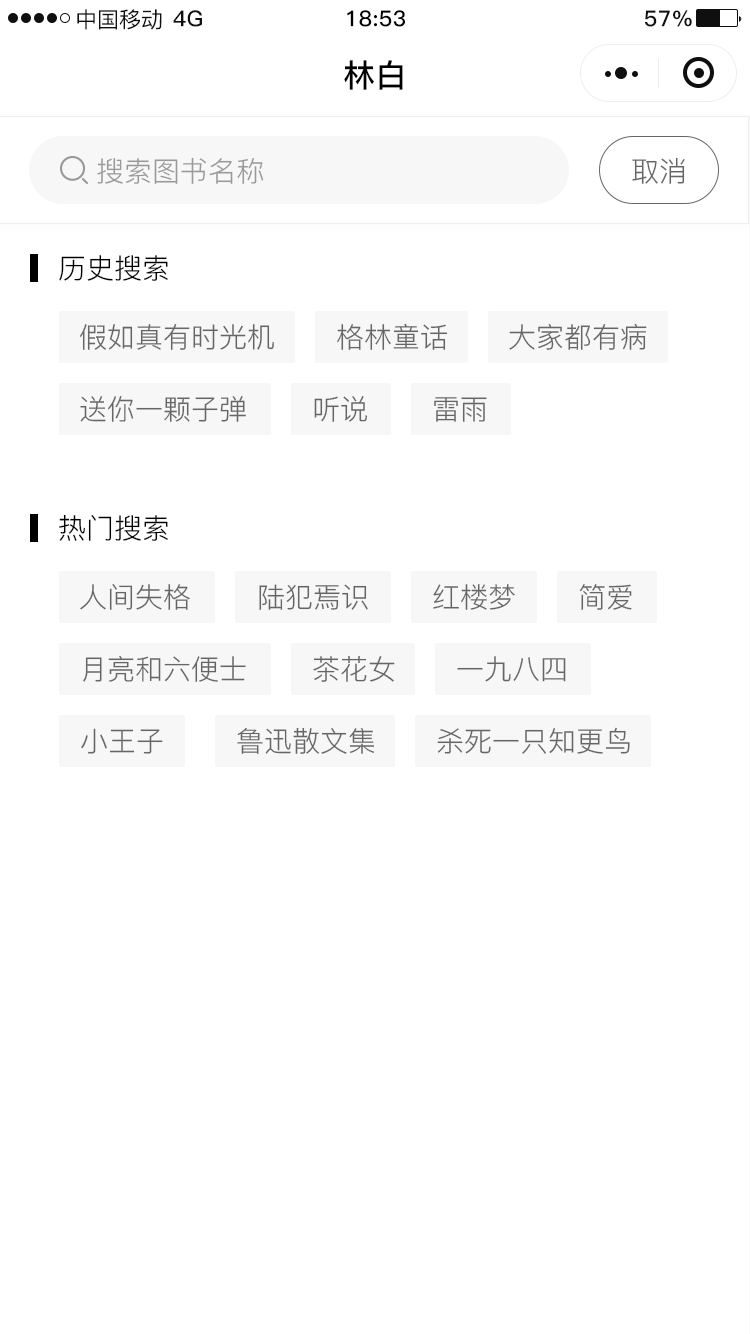
<style>
.page{position:relative;width:750px;height:1334px;background:#ffffff}
.page>*{position:absolute;margin:0}
.t1{font:22px "PingFang-SC-Medium";color:#0f0f0f}
.t2{font:22px "PingFang-SC-Bold";letter-spacing:0.025em;color:#0f0f0f}
.t3{font:22px "PingFang-SC-Bold";letter-spacing:0.025em;color:#000000}
.t4{font:32px "PingFang-SC-Bold";color:#000000}
.t5{font:28px "PingFang-SC-Regular";color:#999999}
.t6{font:28px "PingFang-SC-Regular";color:#666666}
.t7{font:28px "PingFang-SC-Regular";color:#010101}
</style>
<div class="page">
<p class="t1" style="left:77px;top:9px;width:85px;height:21px">中国移动</p>
<p class="t2" style="left:173px;top:10px;width:29px;height:17px">4G</p>
<p class="t3" style="left:347px;top:10px;width:58px;height:17px">18:53</p>
<p class="t2" style="left:645px;top:10px;width:47px;height:17px">57%</p>
<p class="t4" style="left:344px;top:60px;width:59px;height:30px">林白</p>
<p class="t5" style="left:97px;top:157px;width:167px;height:27px">搜索图书名称</p>
<p class="t6" style="left:632px;top:157px;width:53px;height:27px">取消</p>
<p class="t7" style="left:59px;top:255px;width:109px;height:26px">历史搜索</p>
<p class="t6" style="left:80px;top:324px;width:194px;height:26px">假如真有时光机</p>
<p class="t6" style="left:337px;top:323px;width:111px;height:27px">格林童话</p>
<p class="t6" style="left:509px;top:323px;width:138px;height:27px">大家都有病</p>
<p class="t6" style="left:80px;top:396px;width:166px;height:26px">送你一颗子弹</p>
<p class="t6" style="left:314px;top:396px;width:54px;height:26px">听说</p>
<p class="t6" style="left:434px;top:397px;width:53px;height:25px">雷雨</p>
<p class="t7" style="left:59px;top:514px;width:109px;height:27px">热门搜索</p>
<p class="t6" style="left:80px;top:584px;width:110px;height:26px">人间失格</p>
<p class="t6" style="left:259px;top:584px;width:109px;height:26px">陆犯焉识</p>
<p class="t6" style="left:433px;top:584px;width:82px;height:26px">红楼梦</p>
<p class="t6" style="left:579px;top:584px;width:53px;height:26px">简爱</p>
<p class="t6" style="left:83px;top:656px;width:163px;height:26px">月亮和六便士</p>
<p class="t6" style="left:313px;top:656px;width:82px;height:26px">茶花女</p>
<p class="t6" style="left:457px;top:656px;width:109px;height:26px">一九八四</p>
<p class="t6" style="left:81px;top:728px;width:82px;height:26px">小王子</p>
<p class="t6" style="left:237px;top:727px;width:138px;height:27px">鲁迅散文集</p>
<p class="t6" style="left:437px;top:727px;width:193px;height:27px">杀死一只知更鸟</p>
</div>
